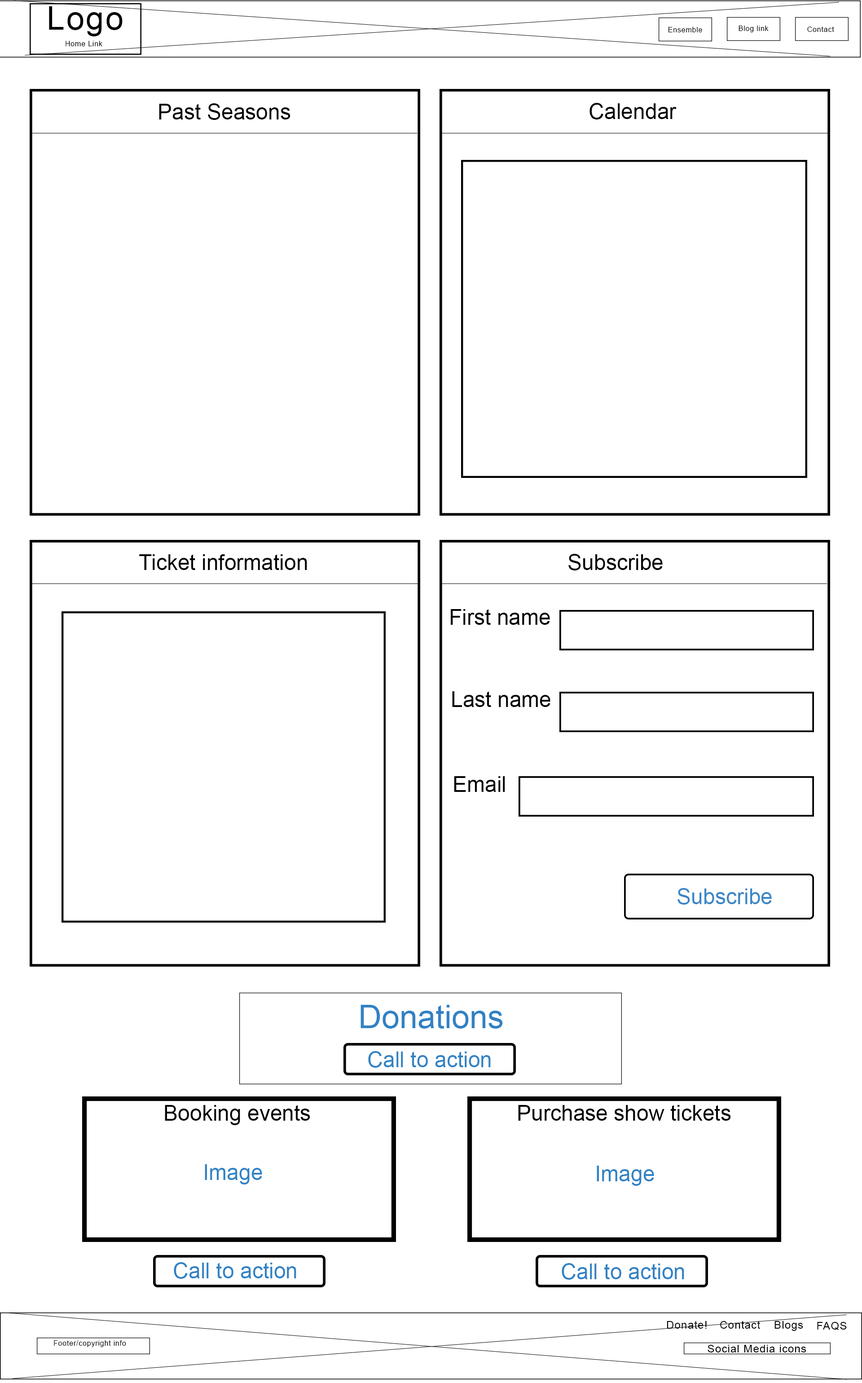
<style>
.page{position:relative;width:862px;height:1383px;background:#ffffff}
.page>*{position:absolute;margin:0}
.t1{font:32.3px "ArialMT";letter-spacing:0.05em;color:#000000}
.t2{font:7.2px "ArialMT";letter-spacing:0.05em;color:#000000}
.t3{font:21.6px "ArialMT";color:#000000}
.t4{font:21.6px "ArialMT";color:#3986c6}
.t5{font:32.3px "ArialMT";color:#3182c4}
.t6{font:21.6px "ArialMT";color:#3182c4}
.t7{font:10.8px "ArialMT";letter-spacing:0.05em;color:#000000}
</style>
<div class="page">
<p class="t1" style="left:49px;top:6px;width:74px;height:30px">Logo</p>
<p class="t2" style="left:668px;top:27px;width:34px;height:5px">Ensemble</p>
<p class="t2" style="left:739px;top:26px;width:30px;height:6px">Blog link</p>
<p class="t2" style="left:808px;top:26px;width:26px;height:6px">Contact</p>
<p class="t2" style="left:66px;top:41px;width:36px;height:5px">Home Link</p>
<p class="t3" style="left:159px;top:103px;width:132px;height:17px">Past Seasons</p>
<p class="t3" style="left:590px;top:103px;width:87px;height:16px">Calendar</p>
<p class="t3" style="left:139px;top:554px;width:168px;height:16px">Ticket information</p>
<p class="t3" style="left:569px;top:554px;width:94px;height:16px">Subscribe</p>
<p class="t3" style="left:451px;top:609px;width:99px;height:16px">First name</p>
<p class="t3" style="left:452px;top:691px;width:99px;height:16px">Last name</p>
<p class="t3" style="left:454px;top:776px;width:51px;height:16px">Email</p>
<p class="t4" style="left:678px;top:888px;width:94px;height:17px">Subscribe</p>
<p class="t5" style="left:361px;top:1005px;width:142px;height:23px">Donations</p>
<p class="t6" style="left:368px;top:1051px;width:123px;height:17px">Call to action</p>
<p class="t3" style="left:165px;top:1105px;width:145px;height:20px">Booking events</p>
<p class="t3" style="left:518px;top:1105px;width:213px;height:16px">Purchase show tickets</p>
<p class="t6" style="left:205px;top:1164px;width:57px;height:20px">Image</p>
<p class="t6" style="left:597px;top:1165px;width:57px;height:21px">Image</p>
<p class="t6" style="left:174px;top:1262px;width:122px;height:17px">Call to action</p>
<p class="t6" style="left:562px;top:1263px;width:122px;height:17px">Call to action</p>
<p class="t7" style="left:667px;top:1320px;width:40px;height:8px">Donate!</p>
<p class="t7" style="left:720px;top:1320px;width:40px;height:8px">Contact</p>
<p class="t7" style="left:775px;top:1321px;width:28px;height:10px">Blogs</p>
<p class="t7" style="left:817px;top:1322px;width:30px;height:8px">FAQS</p>
<p class="t2" style="left:54px;top:1340px;width:72px;height:7px">Footer/copyright info</p>
<p class="t7" style="left:708px;top:1345px;width:99px;height:7px">Social Media icons</p>
</div>
